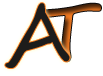
<style>
.page{position:relative;width:103px;height:76px;background:#ffffff}
.page>*{position:absolute;margin:0}
.t1{font:80px "SegoeScript";color:#1d1c1b}
.t2{font:80px "SegoeScript"}
</style>
<div class="page">
<p class="t1" style="left:5px;top:3px;width:65px;height:65px;rotate:-6deg">A</p>
<p class="t2" style="left:39px;top:3px;width:62px;height:59px">T</p>
</div>
